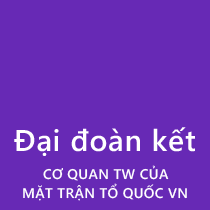
<style>
.page{position:relative;width:210px;height:210px;background:#6729b5}
.page>*{position:absolute;margin:0}
.t1{font:30px "SegoeWP-Semibold";letter-spacing:0.025em;color:#ffffff}
.t2{font:14px "SegoeWP-Semibold";letter-spacing:0.025em;color:#fefefe}
.t3{font:14px "SegoeWP-Semibold";letter-spacing:0.025em;color:#ffffff}
</style>
<div class="page">
<p class="t1" style="left:14px;top:127px;width:181px;height:29px">Đại đoàn kết</p>
<p class="t2" style="left:43px;top:165px;width:126px;height:16px">CƠ QUAN TW CỦA</p>
<p class="t3" style="left:23px;top:183px;width:164px;height:18px">MẶT TRẬN TỔ QUỐC VN</p>
</div>
